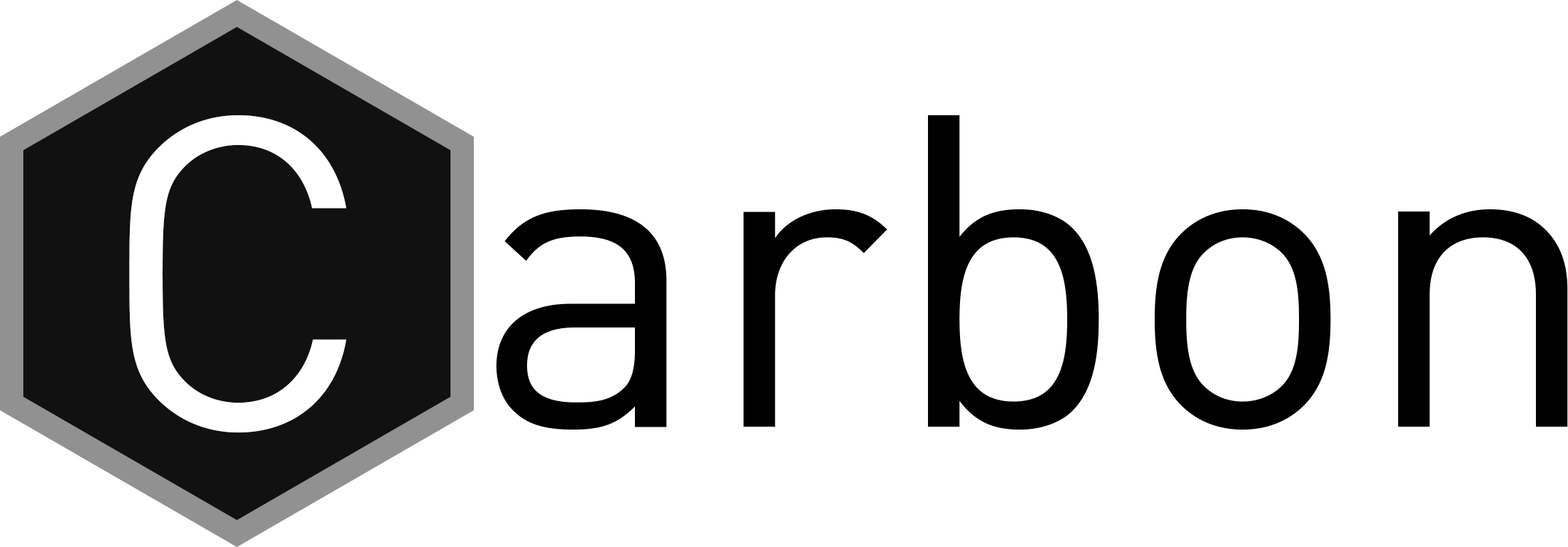
<style>
.page{position:relative;width:1568px;height:547px;background:#ffffff}
.page>*{position:absolute;margin:0}
.t1{font:437.4px "DINPro-Regular";color:#ffffff}
.t2{font:437.4px "DINPro-Regular";color:#000000}
</style>
<div class="page">
<p class="t1" style="left:129px;top:115px;width:217px;height:317px">C</p>
<p class="t2" style="left:496px;top:115px;width:1072px;height:315px">arbon</p>
</div>
